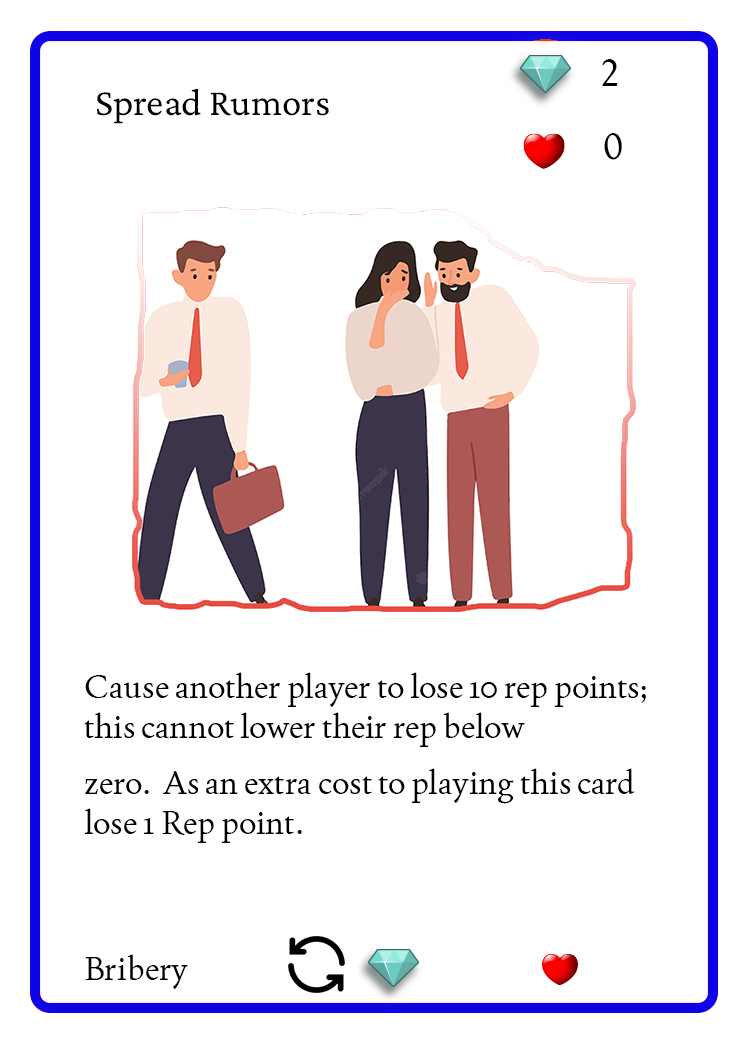
<style>
.page{position:relative;width:750px;height:1050px;background:#ffffff}
.page>*{position:absolute;margin:0}
.t1{font:37.5px "Joan-Regular";color:#000000;text-transform:uppercase}
.t2{font:38.9px "CrimsonPro-Regular";color:#000000}
.t3{font:33.3px "Joan-Regular";color:#000000}
</style>
<div class="page">
<p class="t1" style="left:602px;top:59px;width:16px;height:27px">2</p>
<p class="t2" style="left:97px;top:88px;width:232px;height:36px">Spread Rumors</p>
<p class="t1" style="left:604px;top:133px;width:18px;height:27px">0</p>
<p class="t3" style="left:84px;top:672px;width:562px;height:171px">Cause another player to lose 10 rep points; this cannot lower their rep below <br>zero.  As an extra cost to playing this card lose 1 Rep point.</p>
<p class="t3" style="left:85px;top:954px;width:103px;height:36px">Bribery</p>
</div>
